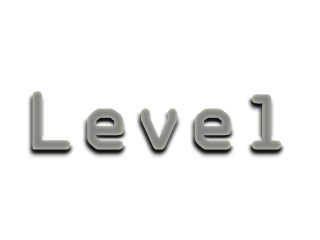
<style>
.page{position:relative;width:320px;height:240px;background:#ffffff}
.page>*{position:absolute;margin:0}
.t1{font:72px "OCRAStd";color:#858585;font-weight:bold}
</style>
<div class="page">
<p class="t1" style="left:32px;top:91px;width:250px;height:59px">Level</p>
</div>
